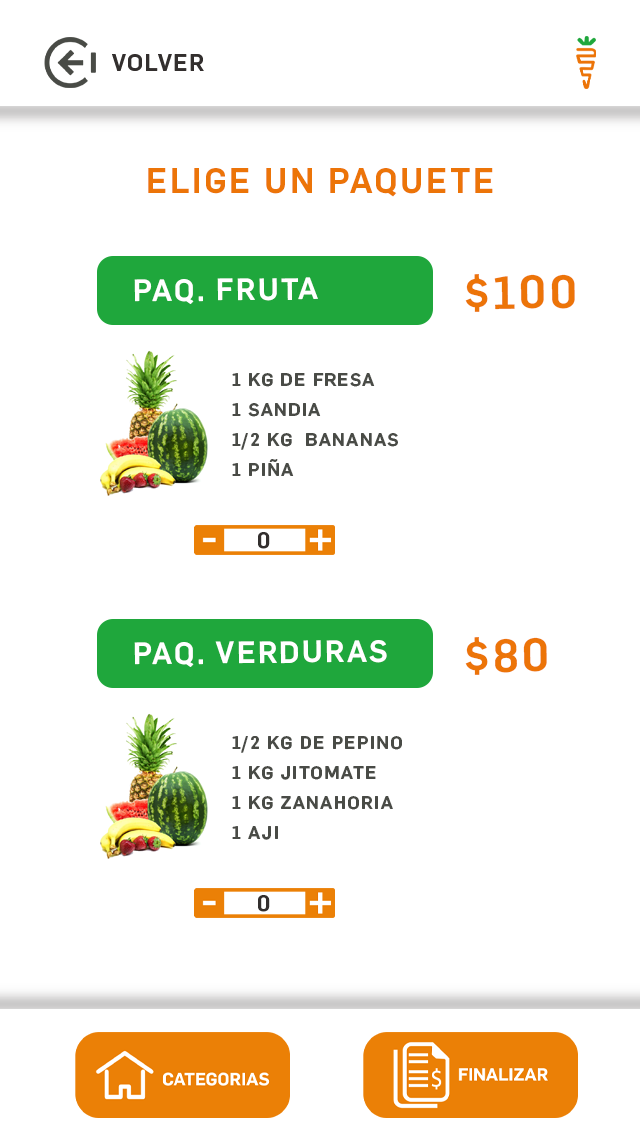
<style>
.page{position:relative;width:640px;height:1136px;background:#ffffff}
.page>*{position:absolute;margin:0}
.t1{font:34px "Flama-Medium";letter-spacing:0.075em;color:#ec7408}
.t2{font:30px "Flama-Medium";letter-spacing:0.075em;color:#ffffff}
.t3{font:45.3px "Flama-Medium";letter-spacing:0.075em;color:#ec7408}
.t4{font:18px/30px "Flama-Medium";letter-spacing:0.075em;color:#494b46}
.t5{font:21.3px "Flama-Medium";letter-spacing:0.075em;color:#332f2e}
</style>
<div class="page">
<p class="t1" style="left:148px;top:168px;width:345px;height:29px">ELIGE UN PAQUETE</p>
<p class="t2" style="left:134px;top:277px;width:184px;height:27px;rotate:-1deg">PAQ. FRUTA</p>
<p class="t3" style="left:465px;top:274px;width:110px;height:38px;rotate:-1deg">$100</p>
<p class="t4" style="left:232px;top:373px;width:166px;height:103px">1 KG DE FRESA<br>1 SANDIA<br>1/2 KG  BANANAS<br>1 PIÑA</p>
<p class="t5" style="left:258px;top:532px;width:12px;height:17px">0</p>
<p class="t2" style="left:134px;top:640px;width:253px;height:27px;rotate:-1deg">PAQ. VERDURAS</p>
<p class="t3" style="left:465px;top:637px;width:82px;height:38px;rotate:-1deg">$80</p>
<p class="t4" style="left:232px;top:736px;width:170px;height:104px">1/2 KG DE PEPINO<br>1 KG JITOMATE<br>1 KG ZANAHORIA<br>1 AJI</p>
<p class="t5" style="left:258px;top:895px;width:12px;height:17px">0</p>
</div>
